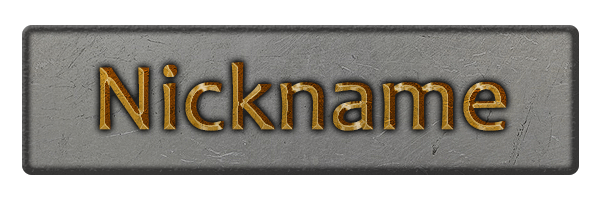
<style>
.page{position:relative;width:600px;height:200px;background:#ffffff}
.page>*{position:absolute;margin:0}
.t1{font:95px "Candara";font-weight:bold}
</style>
<div class="page">
<p class="t1" style="left:99px;top:62px;width:408px;height:69px">Nickname</p>
</div>
